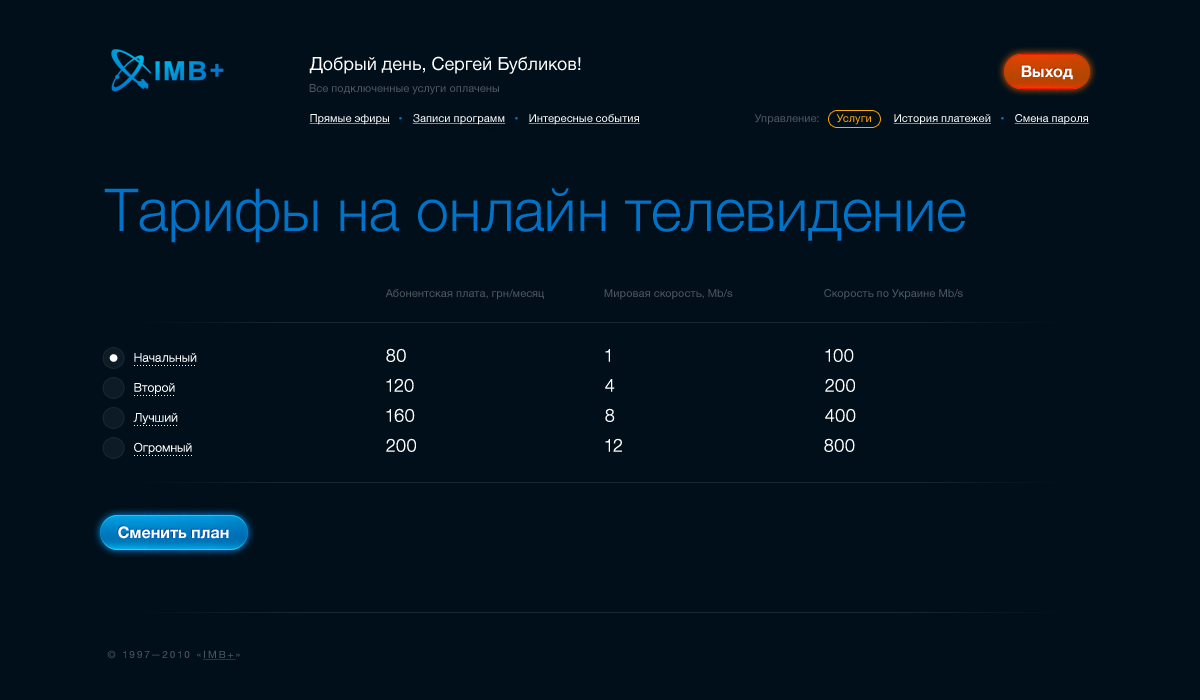
<style>
.page{position:relative;width:1200px;height:700px;background:#000f1a}
.page>*{position:absolute;margin:0}
.t1{font:18px "HelveticaNeue";color:#ffffff}
.t2{font:16px "HelveticaNeue-Bold";color:#ffffff}
.t3{font:11px "HelveticaNeue";color:#4d575f}
.t4{font:11px "HelveticaNeue";color:#ffffff;text-decoration:underline}
.t5{font:11px "HelveticaNeue";color:#ffa800}
.t6{font:59px "HelveticaNeue-Light";color:#0073c9}
.t7{font:12px "HelveticaNeue-Light";color:#ffffff}
.t8{font:18px "HelveticaNeue-Light";color:#ffffff}
.t9{font:10px "HelveticaNeue";letter-spacing:0.2em;color:#4d575f;text-transform:uppercase}
.t10{font:10px "HelveticaNeue";letter-spacing:0.2em;color:#4d575f;text-transform:uppercase;text-decoration:underline}
</style>
<div class="page">
<p class="t1" style="left:309px;top:56px;width:272px;height:18px">Добрый день, Сергей Бубликов!</p>
<p class="t2" style="left:1021px;top:65px;width:52px;height:15px">Выход</p>
<p class="t3" style="left:309px;top:84px;width:190px;height:11px">Все подключенные услуги оплачены</p>
<p class="t4" style="left:309px;top:114px;width:81px;height:11px">Прямые эфиры</p>
<p class="t4" style="left:412px;top:114px;width:94px;height:11px">Записи программ</p>
<p class="t4" style="left:528px;top:114px;width:112px;height:11px">Интересные события</p>
<p class="t3" style="left:754px;top:114px;width:65px;height:11px">Управление:</p>
<p class="t5" style="left:836px;top:114px;width:35px;height:11px">Услуги</p>
<p class="t4" style="left:893px;top:114px;width:98px;height:11px">История платежей</p>
<p class="t4" style="left:1014px;top:114px;width:75px;height:11px">Смена пароля</p>
<p class="t6" style="left:104px;top:188px;width:861px;height:55px">Тарифы на онлайн телевидение</p>
<p class="t3" style="left:385px;top:289px;width:159px;height:11px">Абонентская плата, грн/месяц</p>
<p class="t3" style="left:604px;top:289px;width:129px;height:11px">Мировая скорость, Mb/s</p>
<p class="t3" style="left:824px;top:289px;width:139px;height:11px">Скорость по Украине Mb/s</p>
<p class="t7" style="left:134px;top:353px;width:63px;height:9px">Начальный</p>
<p class="t8" style="left:386px;top:348px;width:20px;height:14px">80</p>
<p class="t8" style="left:605px;top:349px;width:5px;height:13px">1</p>
<p class="t8" style="left:825px;top:348px;width:29px;height:14px">100</p>
<p class="t7" style="left:134px;top:383px;width:41px;height:11px">Второй</p>
<p class="t8" style="left:386px;top:378px;width:28px;height:14px">120</p>
<p class="t8" style="left:605px;top:379px;width:10px;height:13px">4</p>
<p class="t8" style="left:825px;top:378px;width:30px;height:14px">200</p>
<p class="t7" style="left:133px;top:413px;width:45px;height:11px">Лучший</p>
<p class="t8" style="left:386px;top:408px;width:29px;height:14px">160</p>
<p class="t8" style="left:605px;top:408px;width:10px;height:14px">8</p>
<p class="t8" style="left:825px;top:408px;width:31px;height:14px">400</p>
<p class="t8" style="left:386px;top:438px;width:30px;height:14px">200</p>
<p class="t8" style="left:605px;top:438px;width:17px;height:14px">12</p>
<p class="t8" style="left:824px;top:438px;width:31px;height:14px">800</p>
<p class="t7" style="left:134px;top:442px;width:58px;height:12px">Огромный</p>
<p class="t2" style="left:118px;top:526px;width:111px;height:13px">Сменить план</p>
<p class="t9" style="left:107px;top:650px;width:133px;height:10px">© 1997—2010 «<span class="t10">IMB+</span>»</p>
</div>
